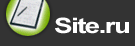
<style>
.page{position:relative;width:135px;height:46px;background:#333333}
.page>*{position:absolute;margin:0}
.t1{font:21.3px "Arial-BoldMT";letter-spacing:-0.06em;color:#ffffff;scale:1.32 1}
</style>
<div class="page">
<p class="t1" style="left:55px;top:17px;width:74px;height:17px">Site.ru</p>
</div>
